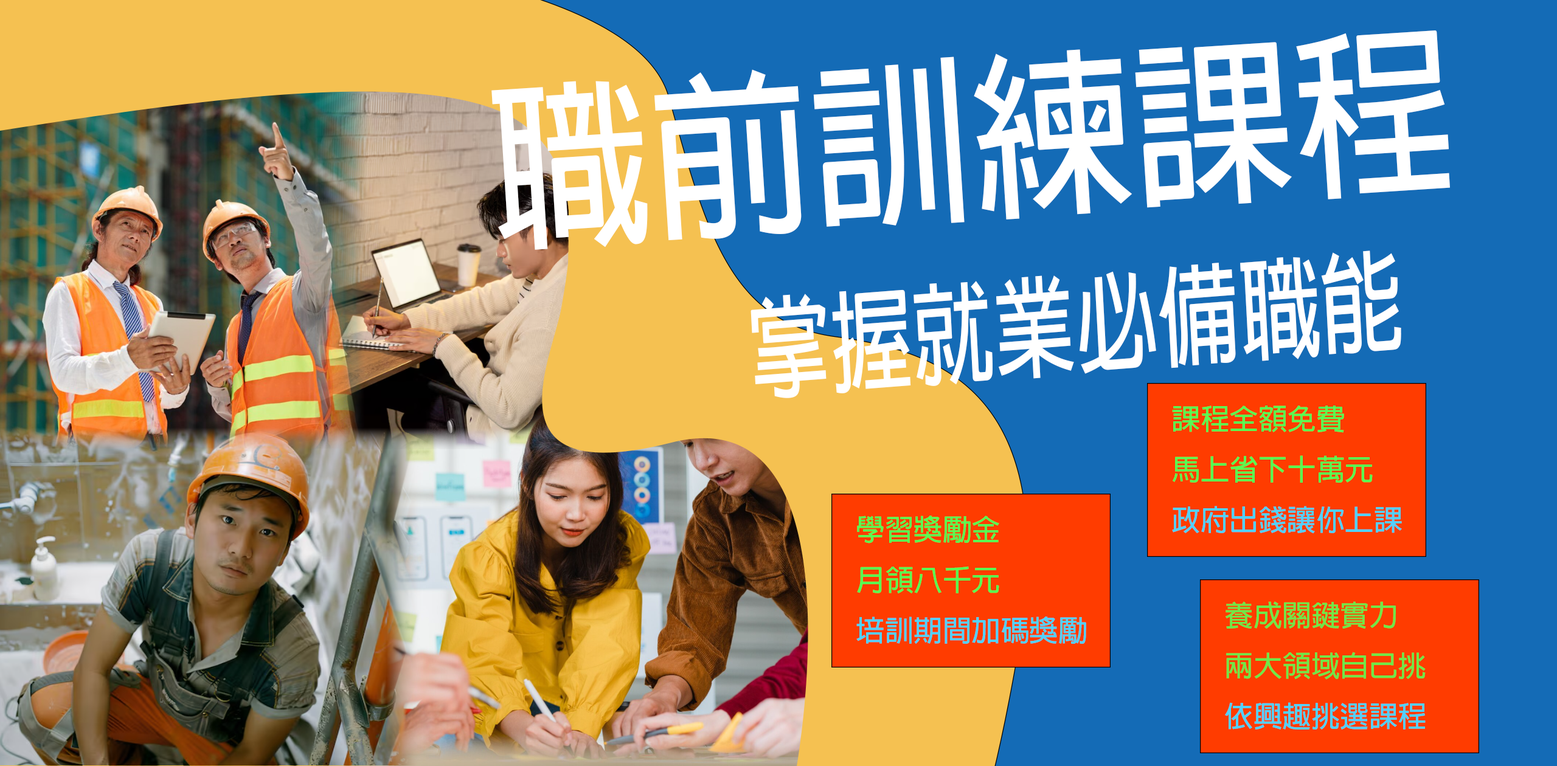
<style>
.page{position:relative;width:1557px;height:766px;background:#146bb6}
.page>*{position:absolute;margin:0}
.t1{font:179.3px "AdobeFanHeitiStd-Bold";color:#ffffff;scale:0.9 1}
.t2{font:110.1px "AdobeFanHeitiStd-Bold";color:#ffffff;scale:0.74 1}
.t3{font:28.9px "AdobeFanHeitiStd-Bold";color:#5afb52}
.t4{font:28.9px "AdobeFanHeitiStd-Bold";color:#52d1fb}
.t5{font:28.9px "AdobeFanHeitiStd-Bold";color:#70e749}
</style>
<div class="page">
<p class="t1" style="left:491px;top:30px;width:958px;height:220px;rotate:-4deg">職前訓練課程</p>
<p class="t2" style="left:750px;top:251px;width:651px;height:147px;rotate:-4deg">掌握就業必備職能</p>
<p class="t3" style="left:1172px;top:406px;width:229px;height:128px">課程全額免費<br>馬上省下十萬元<br><span class="t4">政府出錢讓你上課</span></p>
<p class="t3" style="left:856px;top:516px;width:230px;height:128px">學習獎勵金<br>月領八千元<br><span class="t4">培訓期間加碼獎勵</span></p>
<p class="t5" style="left:1225px;top:601px;width:200px;height:129px">養成關鍵實力<br>兩大領域自己挑<br><span class="t4">依興趣挑選課程</span></p>
</div>
